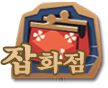
<style>
.page{position:relative;width:108px;height:88px;background:#ffffff}
.page>*{position:absolute;margin:0}
.t1{font:24px "MJemokBatang";letter-spacing:-0.08em;color:#e7c18f;font-weight:bold;scale:1.12 1}
.t2{font:33px "MJemokBatang";letter-spacing:-0.08em;color:#e7c18f;font-weight:bold;scale:1.12 1}
</style>
<div class="page">
<p class="t1" style="left:2px;top:44px;width:83px;height:31px"><span class="t2">잡</span>화점</p>
</div>
